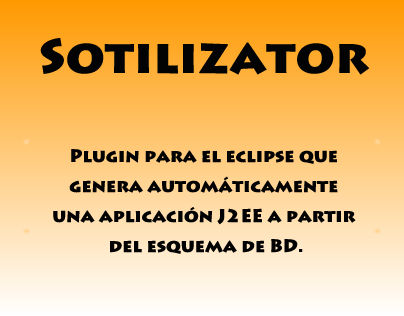
<style>
.page{position:relative;width:404px;height:316px}
.page>*{position:absolute;margin:0}
.t1{font:48px "LithosPro-Black";color:#030303}
.t2{font:18px/30px "LithosPro-Black";color:#010101}
</style>
<div class="page">
<p class="t1" style="left:40px;top:38px;width:330px;height:37px">Sotilizator</p>
<p class="t2" style="left:53px;top:149px;width:303px;height:105px;text-align:center">Plugin para el eclipse que <br>genera automáticamente <br>una aplicación J2EE a partir <br>del esquema de BD.</p>
</div>
